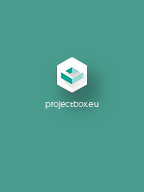
<style>
.page{position:relative;width:144px;height:192px;background:#499b8d}
.page>*{position:absolute;margin:0}
.t1{font:7.9px "Montserrat-Thin";letter-spacing:0.025em;color:#f8f8f8}
</style>
<div class="page">
<p class="t1" style="left:45px;top:101px;width:54px;height:8px">projectbox.eu</p>
</div>
